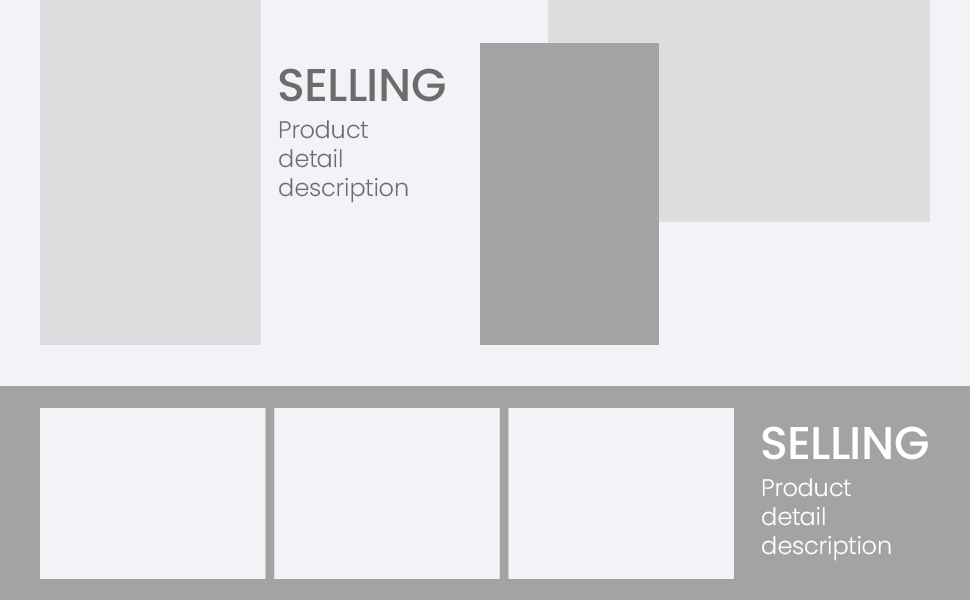
<style>
.page{position:relative;width:970px;height:600px;background:#f2f3f6}
.page>*{position:absolute;margin:0}
.t1{font:46px "Poppins-Medium";color:#6c6c6c;text-transform:uppercase}
.t2{font:24px "Poppins-Light";color:#6c6c6c}
.t3{font:46px "Poppins-Medium";color:#ffffff;text-transform:uppercase}
.t4{font:24px "Poppins-Light";color:#ffffff}
</style>
<div class="page">
<p class="t1" style="left:279px;top:68px;width:166px;height:34px">selling</p>
<p class="t2" style="left:279px;top:120px;width:129px;height:83px">Product<br>detail<br>description</p>
<p class="t3" style="left:762px;top:426px;width:166px;height:34px">selling</p>
<p class="t4" style="left:762px;top:478px;width:129px;height:83px">Product<br>detail<br>description</p>
</div>
